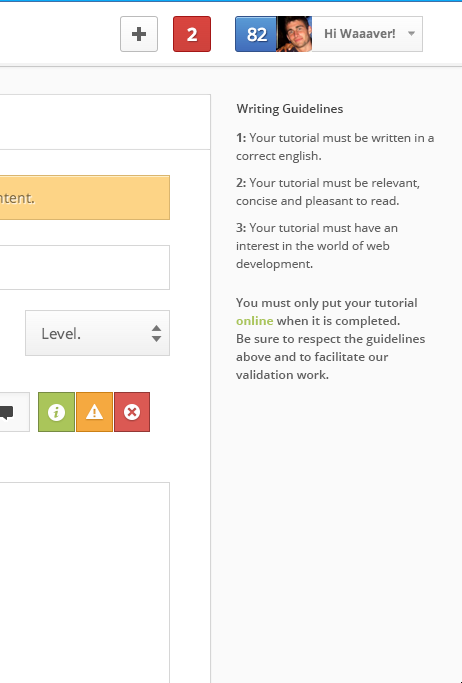
<style>
.page{position:relative;width:462px;height:683px;background:#fafafa}
.page>*{position:absolute;margin:0}
.t1{font:12px "OpenSans-Semibold";color:#454545}
.t2{font:12px/18px "OpenSans";color:#606060}
.t3{font:12px/18px "OpenSans-Bold";color:#606060}
.t4{font:12px/18px "OpenSans-Semibold";color:#606060}
.t5{font:12px/18px "OpenSans-Bold";color:#aac55a}
</style>
<div class="page">
<p class="t1" style="left:236px;top:104px;width:107px;height:12px">Writing Guidelines</p>
<p class="t2" style="left:236px;top:133px;width:198px;height:30px"><span class="t3">1:</span> Your tutorial must be written in a<br>correct english.</p>
<p class="t2" style="left:236px;top:178px;width:184px;height:30px"><span class="t3">2:</span> Your tutorial must be relevant,<br>concise and pleasant to read.</p>
<p class="t2" style="left:236px;top:223px;width:162px;height:48px"><span class="t3">3:</span> Your tutorial must have an<br>interest in the world of web<br>development.</p>
<p class="t4" style="left:236px;top:298px;width:189px;height:81px">You must only put your tutorial<br><span class="t5">online</span> when it is completed.<br>Be sure to respect the guidelines<br>above and to facilitate our<br>validation work.</p>
</div>
